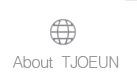
<style>
.page{position:relative;width:137px;height:80px;background:#ffffff}
.page>*{position:absolute;margin:0}
.t1{font:16px "Haansoft-Dotum";letter-spacing:-0.05em;color:#999999}
</style>
<div class="page">
<p class="t1" style="left:12px;top:56px;width:107px;height:12px">About  TJOEUN</p>
</div>
